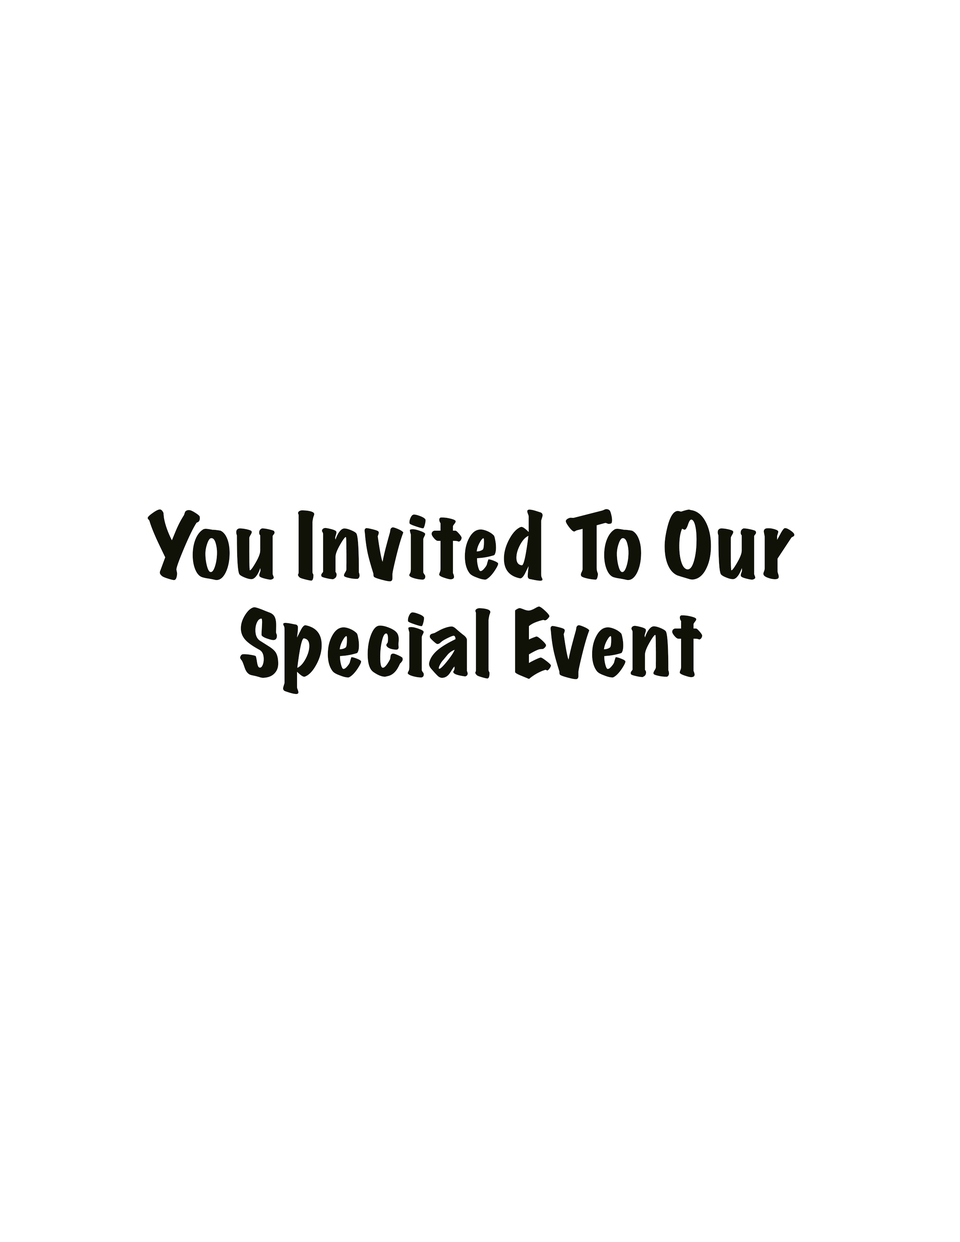
<style>
.page{position:relative;width:960px;height:1242px;background:#ffffff}
.page>*{position:absolute;margin:0}
.t1{font:81.6px "MarkerFelt-Wide";color:#111207}
</style>
<div class="page">
<p class="t1" style="left:148px;top:509px;width:646px;height:185px;text-align:center">You Invited To Our Special Event</p>
</div>
